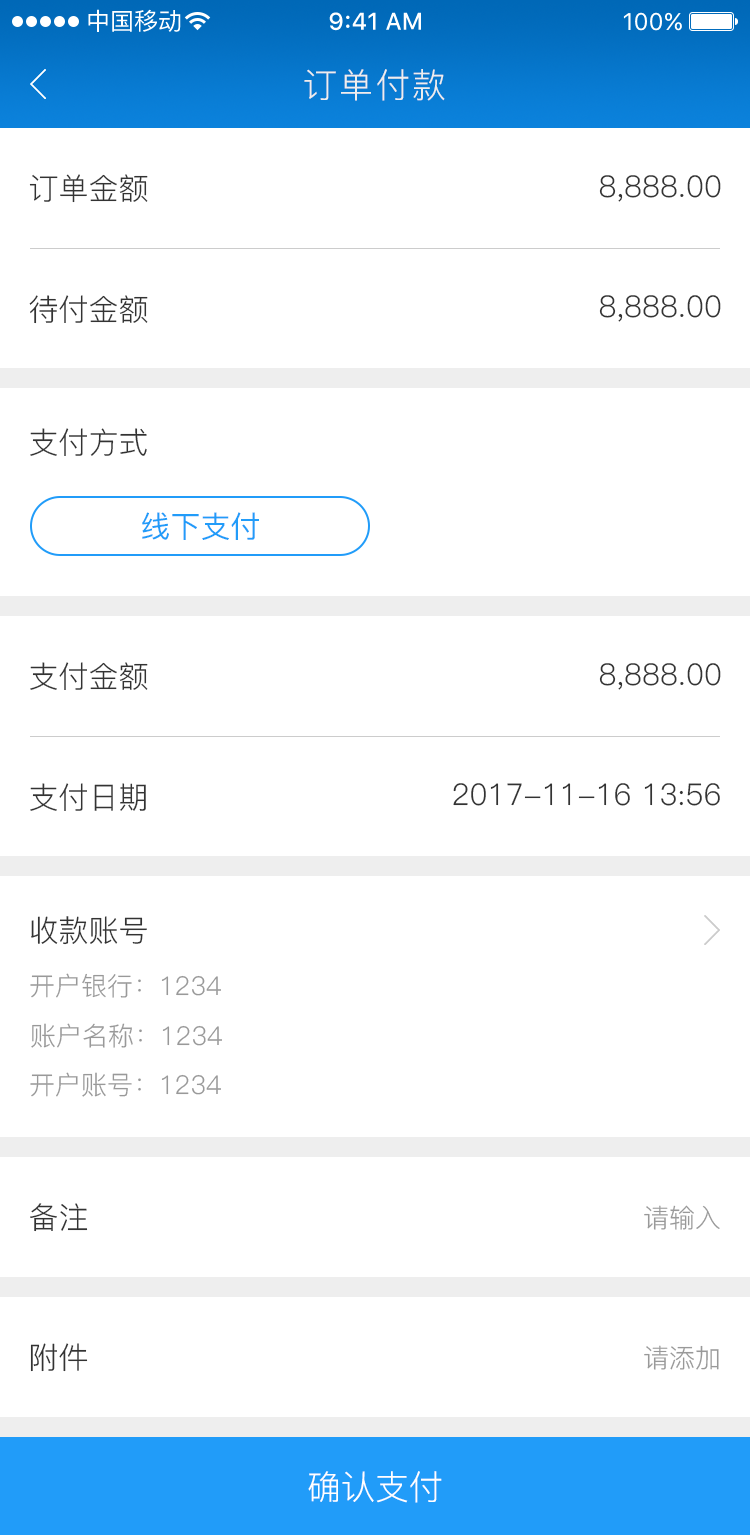
<style>
.page{position:relative;width:750px;height:1535px;background:#ffffff}
.page>*{position:absolute;margin:0}
.t1{font:34px "PingFang-SC-Regular";letter-spacing:0.06em;color:#eeeeee}
.t2{font:30px "PingFang-SC-Regular";color:#333333}
.t3{font:30px "PingFang-SC-Medium";color:#219cf9}
.t4{font:26px "PingFang-SC-Regular";color:#999999}
.t5{font:34px "PingFang-SC-Regular";color:#ffffff}
</style>
<div class="page">
<p class="t1" style="left:304px;top:69px;width:141px;height:32px">订单付款</p>
<p class="t2" style="left:29px;top:174px;width:119px;height:29px">订单金额</p>
<p class="t2" style="left:599px;top:175px;width:122px;height:27px">8,888.00</p>
<p class="t2" style="left:29px;top:295px;width:119px;height:29px">待付金额</p>
<p class="t2" style="left:599px;top:295px;width:122px;height:27px">8,888.00</p>
<p class="t2" style="left:30px;top:428px;width:117px;height:28px">支付方式</p>
<p class="t3" style="left:142px;top:512px;width:117px;height:28px">线下支付</p>
<p class="t2" style="left:30px;top:662px;width:118px;height:28px">支付金额</p>
<p class="t2" style="left:599px;top:663px;width:122px;height:27px">8,888.00</p>
<p class="t2" style="left:30px;top:783px;width:116px;height:28px">支付日期</p>
<p class="t2" style="left:453px;top:783px;width:267px;height:23px">2017-11-16 13:56</p>
<p class="t2" style="left:31px;top:916px;width:116px;height:29px">收款账号</p>
<p class="t4" style="left:30px;top:973px;width:191px;height:25px">开户银行：1234</p>
<p class="t4" style="left:31px;top:1023px;width:191px;height:25px">账户名称：1234</p>
<p class="t4" style="left:30px;top:1072px;width:191px;height:25px">开户账号：1234</p>
<p class="t2" style="left:30px;top:1203px;width:58px;height:29px">备注</p>
<p class="t4" style="left:644px;top:1205px;width:76px;height:25px">请输入</p>
<p class="t2" style="left:30px;top:1343px;width:58px;height:29px">附件</p>
<p class="t4" style="left:644px;top:1345px;width:75px;height:25px">请添加</p>
<p class="t5" style="left:308px;top:1471px;width:134px;height:32px">确认支付</p>
</div>
